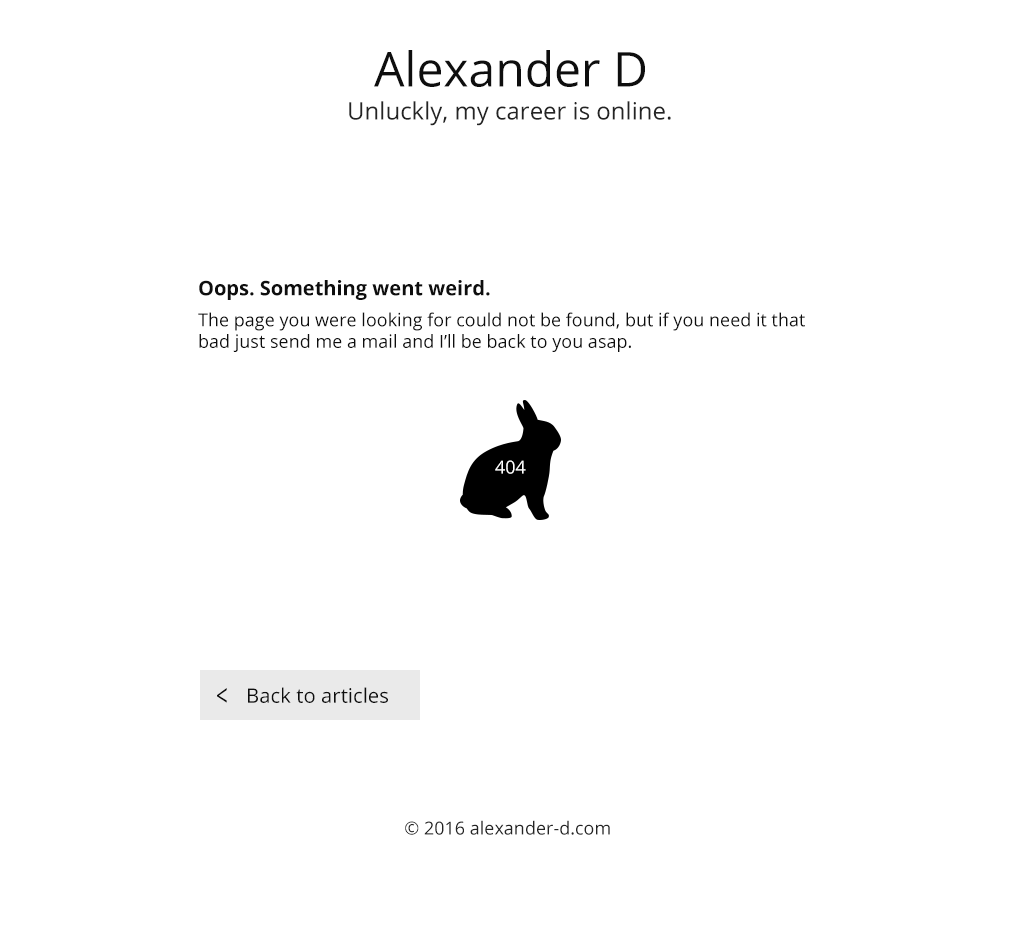
<style>
.page{position:relative;width:1020px;height:930px;background:#ffffff}
.page>*{position:absolute;margin:0}
.t1{font:48px "OpenSans";color:#0e0e0e}
.t2{font:24px "OpenSans";color:#242424}
.t3{font:20px "OpenSans-Bold";color:#0e0e0e}
.t4{font:18px "OpenSans";color:#0e0e0e}
.t5{font:18px "OpenSans";color:#ffffff}
.t6{font:30.3px "OpenSans";color:#0e0e0e;scale:0.67 1}
.t7{font:20.1px "OpenSans";color:#0e0e0e}
.t8{font:18px "OpenSans";color:#242424}
</style>
<div class="page">
<p class="t1" style="left:374px;top:50px;width:271px;height:37px">Alexander D</p>
<p class="t2" style="left:349px;top:101px;width:322px;height:25px">Unluckly, my career is online.</p>
<p class="t3" style="left:199px;top:280px;width:291px;height:20px">Oops. Something went weird.</p>
<p class="t4" style="left:198px;top:312px;width:607px;height:40px">The page you were looking for could not be found, but if you need it that <br>bad just send me a mail and I’ll be back to you asap.</p>
<p class="t5" style="left:495px;top:460px;width:31px;height:14px">404</p>
<p class="t6" style="left:217px;top:688px;width:10px;height:15px;rotate:180deg">&gt;</p>
<p class="t7" style="left:248px;top:687px;width:140px;height:16px">Back to articles</p>
<p class="t8" style="left:405px;top:820px;width:205px;height:15px">© 2016 alexander-d.com</p>
</div>
